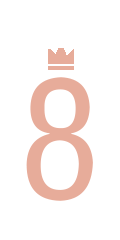
<style>
.page{position:relative;width:120px;height:240px;background:#ffffff}
.page>*{position:absolute;margin:0}
.t1{font:162.7px "FZYTK--GBK1-0";letter-spacing:-0.02em;color:#e7ac9a}
</style>
<div class="page">
<p class="t1" style="left:26px;top:77px;width:67px;height:124px">8</p>
</div>
